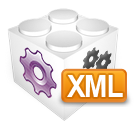
<style>
.page{position:relative;width:139px;height:132px;background:#ffffff}
.page>*{position:absolute;margin:0}
.t1{font:30.8px "Arial-BoldMT";letter-spacing:-0.04em;color:#ffffff;scale:0.9 1}
</style>
<div class="page">
<p class="t1" style="left:67px;top:75px;width:56px;height:22px">XML</p>
</div>
